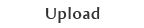
<style>
.page{position:relative;width:144px;height:28px;background:#ffffff}
.page>*{position:absolute;margin:0}
.t1{font:16px "AmiraParadiso";letter-spacing:0.05em;color:#333333}
</style>
<div class="page">
<p class="t1" style="left:46px;top:7px;width:54px;height:16px">Upload</p>
</div>
